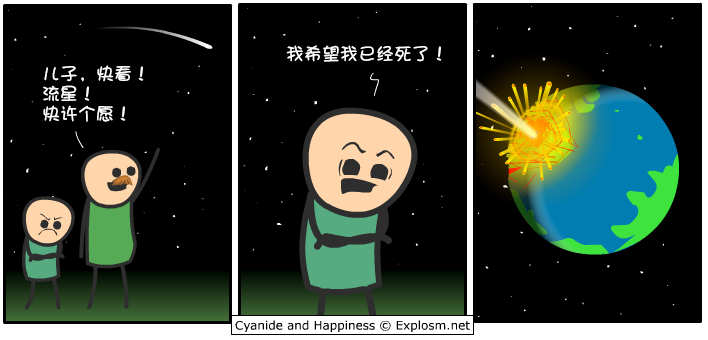
<style>
.page{position:relative;width:708px;height:340px;background:#000000}
.page>*{position:absolute;margin:0}
.t1{font:18px "DFPShaoNvW5";color:#ffffff}
.t2{font:18px/20px "DFPShaoNvW5";color:#ffffff}
</style>
<div class="page">
<p class="t1" style="left:286px;top:45px;width:156px;height:17px">我希望我已经死了！</p>
<p class="t2" style="left:43px;top:65px;width:101px;height:57px">儿子，快看！<br>流星！<br>快许个愿！</p>
</div>
